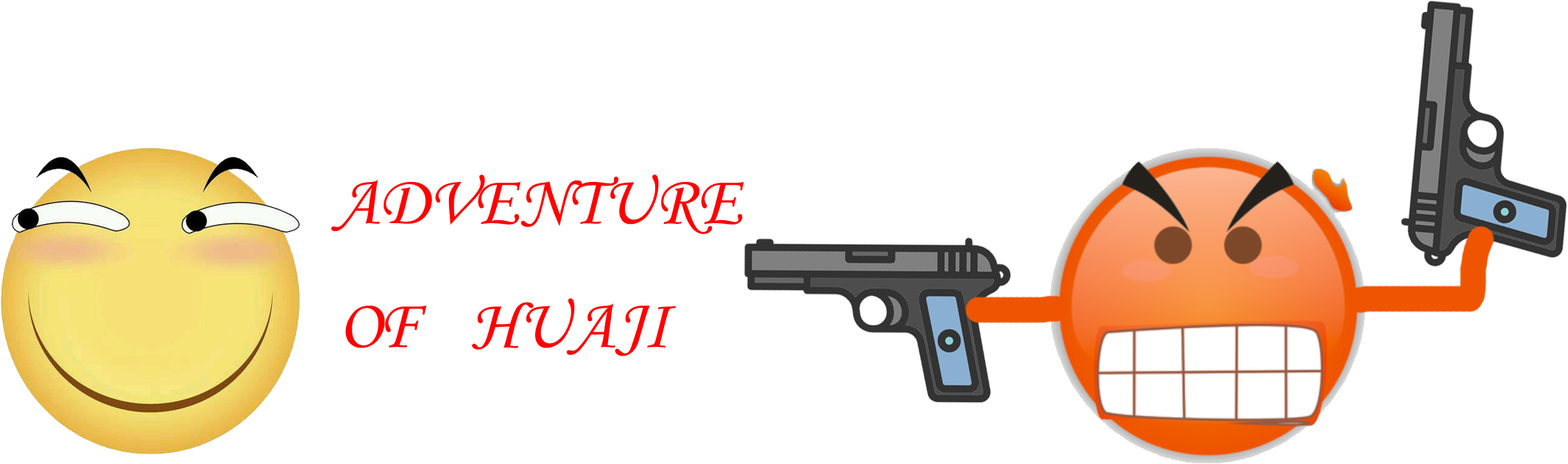
<style>
.page{position:relative;width:1568px;height:464px;background:#ffffff}
.page>*{position:absolute;margin:0}
.t1{font:70.7px "STLiti";color:#ff0000}
</style>
<div class="page">
<p class="t1" style="left:331px;top:174px;width:413px;height:182px">ADVENTURE<br>OF   HUAJI</p>
</div>
